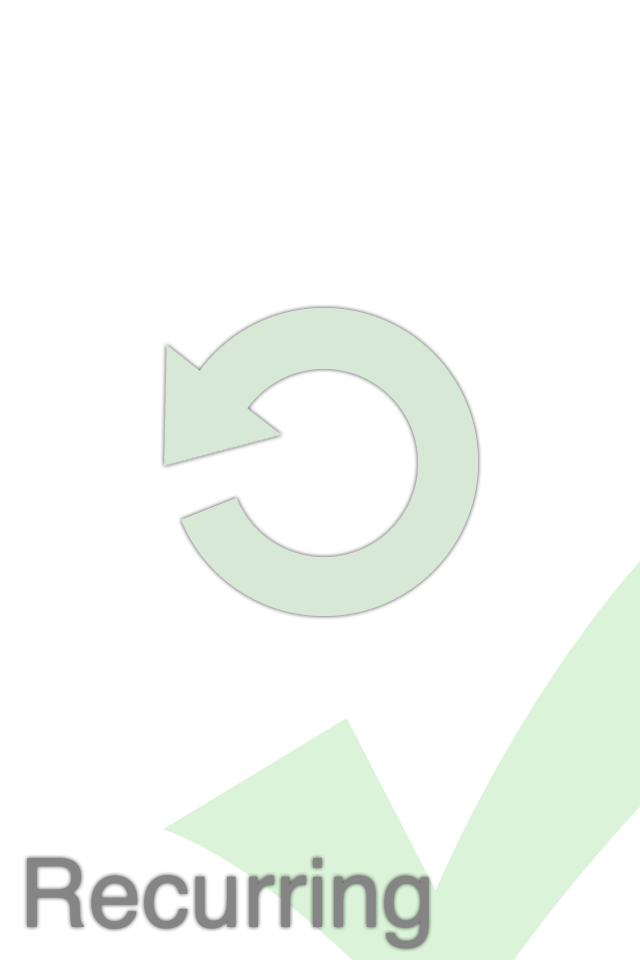
<style>
.page{position:relative;width:640px;height:960px;background:#ffffff}
.page>*{position:absolute;margin:0}
.t1{font:96px "Helvetica";color:#858585}
</style>
<div class="page">
<p class="t1" style="left:27px;top:858px;width:402px;height:91px">Recurring</p>
</div>
